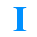
<style>
.page{position:relative;width:37px;height:37px;background:#ffffff}
.page>*{position:absolute;margin:0}
.t1{font:36px "TimesNewRomanPS-BoldMT";color:#0090ff}
</style>
<div class="page">
<p class="t1" style="left:13px;top:7px;width:14px;height:24px">I</p>
</div>
